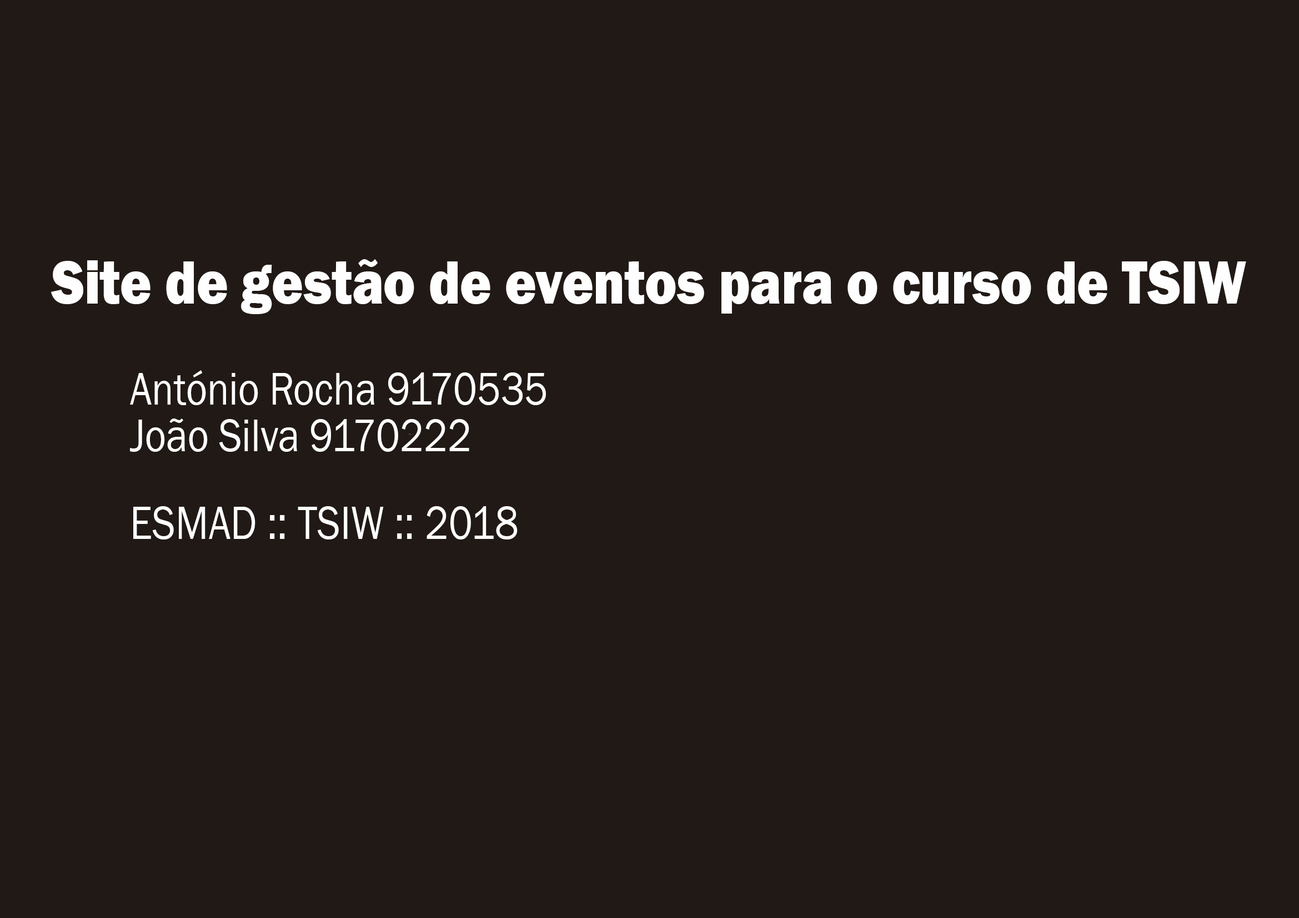
<style>
.page{position:relative;width:1299px;height:918px;background:#211915}
.page>*{position:absolute;margin:0}
.t1{font:63.2px "FranklinGothic-Heavy";color:#fefefe;scale:0.85 1}
.t2{font:47.5px "FranklinGothic-Book";color:#fefefe;scale:0.85 1}
.t3{font:48.2px "FranklinGothic-Book";color:#fefefe;scale:0.85 1}
</style>
<div class="page">
<p class="t1" style="left:51px;top:259px;width:1195px;height:55px">Site de gestão de eventos para o curso de TSIW</p>
<p class="t2" style="left:130px;top:370px;width:416px;height:35px">António Rocha 9170535</p>
<p class="t2" style="left:130px;top:419px;width:339px;height:33px">João Silva 9170222</p>
<p class="t3" style="left:133px;top:506px;width:384px;height:34px">ESMAD :: TSIW :: 2018</p>
</div>
